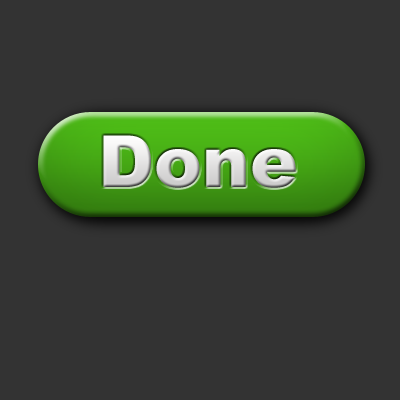
<style>
.page{position:relative;width:400px;height:400px;background:#333333}
.page>*{position:absolute;margin:0}
.t1{font:72px "Arial-Black"}
</style>
<div class="page">
<p class="t1" style="left:103px;top:135px;width:193px;height:53px">Done</p>
</div>
